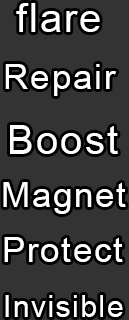
<style>
.page{position:relative;width:129px;height:320px;background:#333333}
.page>*{position:absolute;margin:0}
.t1{font:40px "ArialMT";letter-spacing:0.05em;color:#ffffff}
.t2{font:35px "ArialMT";letter-spacing:0.05em;color:#ffffff}
.t3{font:30px "ArialMT";letter-spacing:0.05em;color:#ffffff}
</style>
<div class="page">
<p class="t1" style="left:16px;top:3px;width:84px;height:29px">flare</p>
<p class="t2" style="left:5px;top:64px;width:112px;height:32px">Repair</p>
<p class="t1" style="left:10px;top:125px;width:108px;height:29px">Boost</p>
<p class="t2" style="left:3px;top:182px;width:123px;height:32px">Magnet</p>
<p class="t2" style="left:4px;top:237px;width:119px;height:25px">Protect</p>
<p class="t3" style="left:5px;top:295px;width:118px;height:22px">Invisible</p>
</div>
